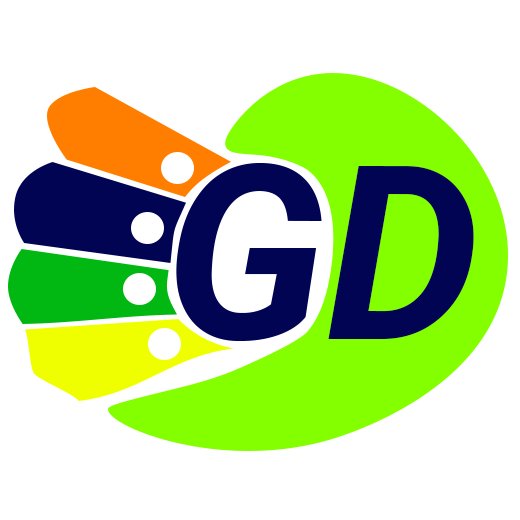
<style>
.page{position:relative;width:520px;height:520px;background:#ffffff}
.page>*{position:absolute;margin:0}
.t1{font:243.6px "Roboto-BoldItalic";color:#000453}
</style>
<div class="page">
<p class="t1" style="left:176px;top:163px;width:146px;height:178px">G</p>
<p class="t1" style="left:328px;top:166px;width:146px;height:173px">D</p>
</div>
